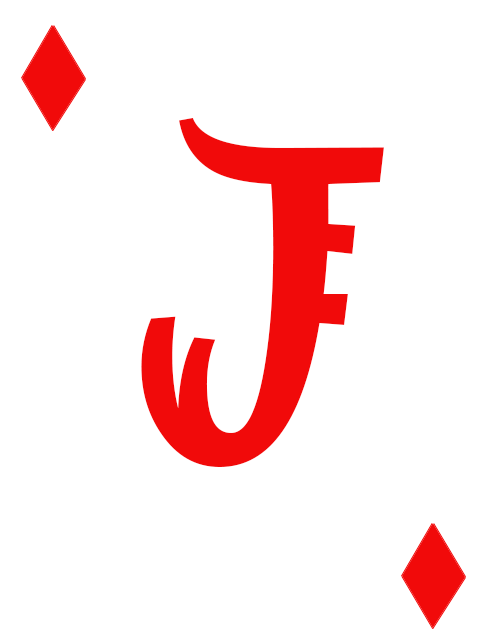
<style>
.page{position:relative;width:480px;height:640px;background:#ffffff}
.page>*{position:absolute;margin:0}
.t1{font:386.3px "Jokerman-Regular";color:#f10a0a}
</style>
<div class="page">
<p class="t1" style="left:141px;top:118px;width:243px;height:349px">J</p>
</div>
